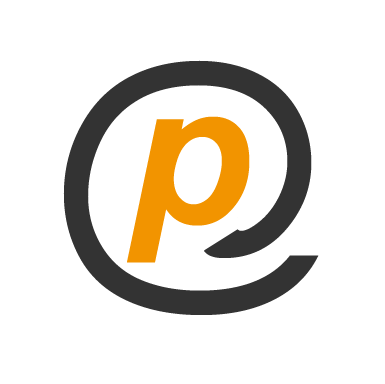
<style>
.page{position:relative;width:385px;height:384px;background:#ffffff}
.page>*{position:absolute;margin:0}
.t1{font:270px "Arial-BoldMT";color:#333333}
.t2{font:200px "Arial-BoldItalicMT";color:#f29400}
</style>
<div class="page">
<p class="t1" style="left:63px;top:60px;width:256px;height:255px">@</p>
<p class="t2" style="left:127px;top:116px;width:123px;height:147px">p</p>
</div>
